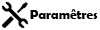
<style>
.page{position:relative;width:100px;height:30px;background:#ffffff}
.page>*{position:absolute;margin:0}
.t1{font:13px "BerlinSansFBDemi-Bold";color:#000000}
</style>
<div class="page">
<p class="t1" style="left:30px;top:9px;width:68px;height:10px">Paramêtres</p>
</div>
